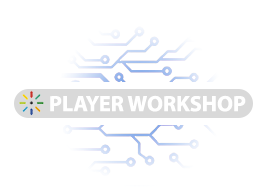
<style>
.page{position:relative;width:270px;height:196px;background:#ffffff}
.page>*{position:absolute;margin:0}
.t1{font:22.2px "MyriadHebrew-Bold";color:#ffffff}
</style>
<div class="page">
<p class="t1" style="left:50px;top:95px;width:196px;height:17px">PLAYER WORKSHOP</p>
</div>
